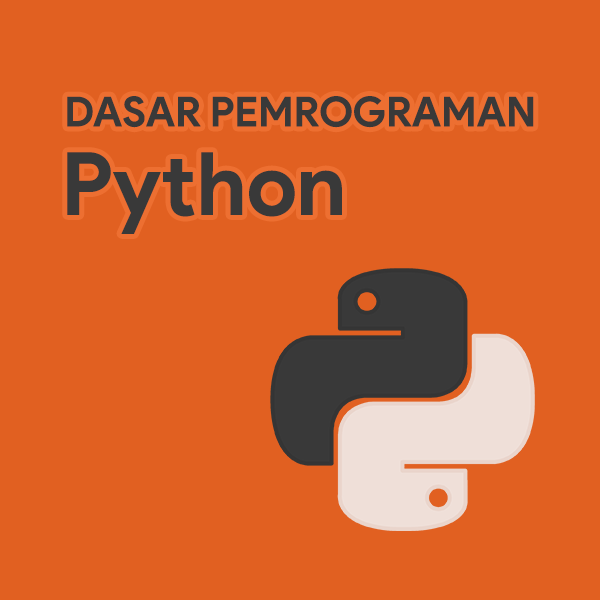
<style>
.page{position:relative;width:600px;height:600px;background:#e16021}
.page>*{position:absolute;margin:0}
.t1{font:41.3px "ProductSans-Bold";color:#393939}
.t2{font:87.4px "ProductSans-Bold";color:#393939}
</style>
<div class="page">
<p class="t1" style="left:67px;top:96px;width:467px;height:32px">DASAR PEMROGRAMAN</p>
<p class="t2" style="left:67px;top:152px;width:275px;height:82px">Python</p>
</div>
